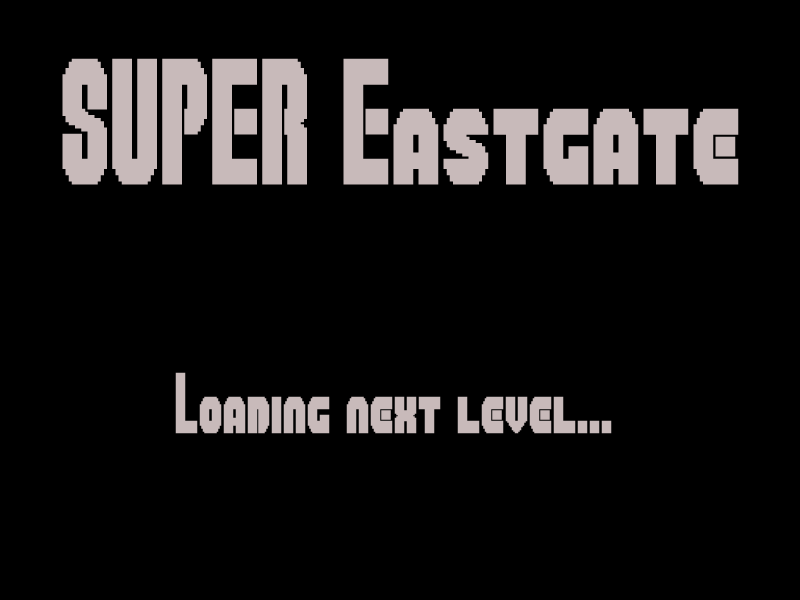
<style>
.page{position:relative;width:800px;height:600px;background:#000000}
.page>*{position:absolute;margin:0}
.t1{font:125px "SuperPlumberBrothers";color:#c8baba}
.t2{font:60px "SuperPlumberBrothers";color:#c8baba}
</style>
<div class="page">
<p class="t1" style="left:62px;top:58px;width:677px;height:127px">SUPER Eastgate</p>
<p class="t2" style="left:175px;top:372px;width:437px;height:62px">Loading next level...</p>
</div>
